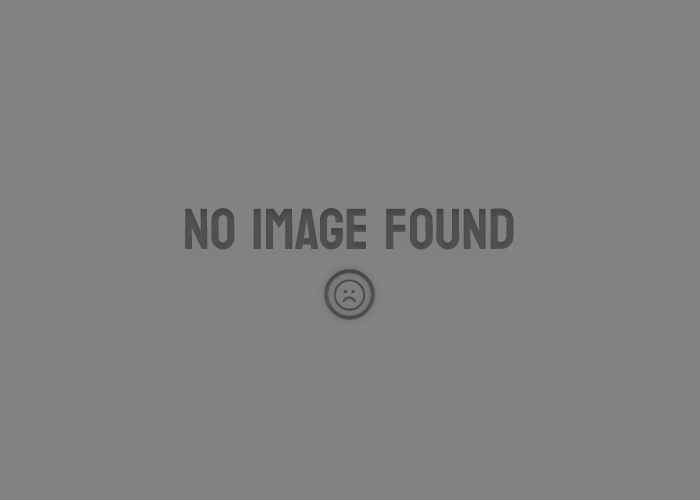
<style>
.page{position:relative;width:700px;height:500px;background:#838383}
.page>*{position:absolute;margin:0}
.t1{font:58px "Koulen-Regular";color:#525252}
</style>
<div class="page">
<p class="t1" style="left:185px;top:207px;width:329px;height:43px">NO IMAGE FOUND</p>
</div>
